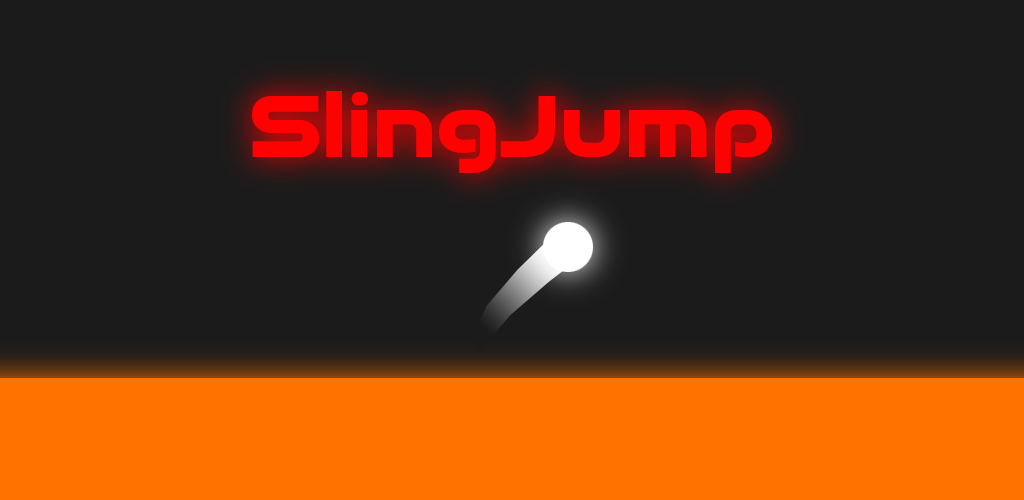
<style>
.page{position:relative;width:1024px;height:500px;background:#1b1b1b}
.page>*{position:absolute;margin:0}
.t1{font:94px "GoodTimingRg-Bold";color:#ff0101}
</style>
<div class="page">
<p class="t1" style="left:252px;top:91px;width:520px;height:82px">SlingJump</p>
</div>
